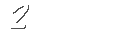
<style>
.page{position:relative;width:128px;height:32px;background:#ffffff}
.page>*{position:absolute;margin:0}
.t1{font:43px "DomDiagonalBT-Regular";letter-spacing:0.075em;color:#ffffff;scale:1.05 1}
</style>
<div class="page">
<p class="t1" style="left:10px;top:2px;width:19px;height:27px">2</p>
</div>
